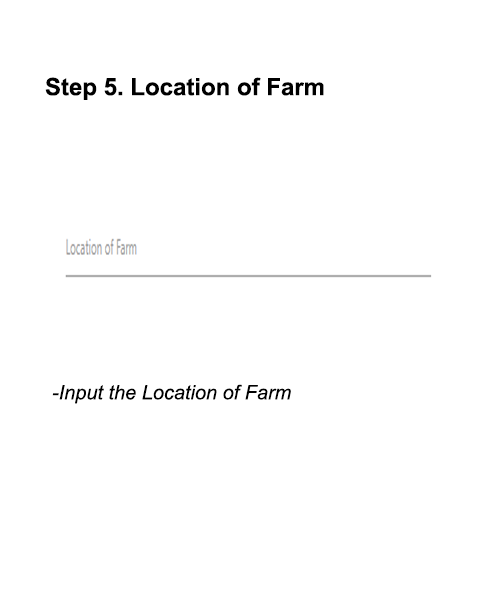
<style>
.page{position:relative;width:500px;height:600px;background:#ffffff}
.page>*{position:absolute;margin:0}
.t1{font:24px "Arial-BoldMT";color:#000000}
.t2{font:20px "Arial-ItalicMT";color:#000000}
</style>
<div class="page">
<p class="t1" style="left:45px;top:77px;width:279px;height:23px">Step 5. Location of Farm</p>
<p class="t2" style="left:52px;top:384px;width:239px;height:20px">-Input the Location of Farm</p>
</div>
